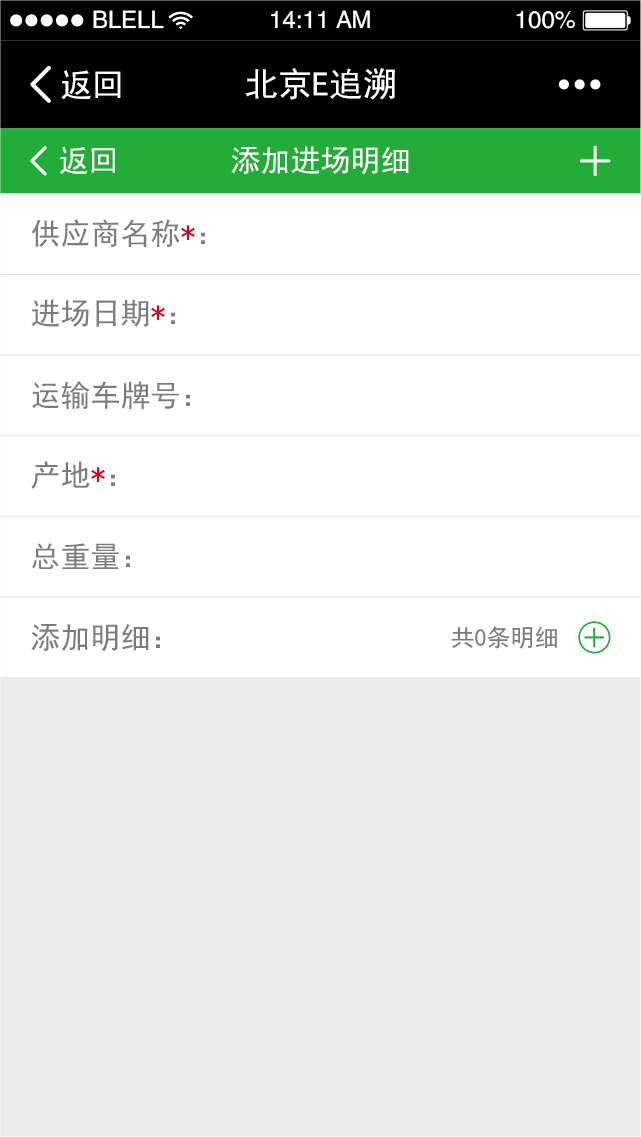
<style>
.page{position:relative;width:641px;height:1137px;background:#ebebeb}
.page>*{position:absolute;margin:0}
.t1{font:24px "FZHTJW--GB1-0";color:#ffffff}
.t2{font:32px "SimHei";color:#ffffff}
.t3{font:34px "SimHei";color:#ffffff}
.t4{font:30px "SimHei";color:#ffffff}
.t5{font:30px "SimHei";color:#7c7c7c}
.t6{font:30px "SimHei";color:#d8001a}
.t7{font:24px "SimHei";color:#7c7c7c}
</style>
<div class="page">
<p class="t1" style="left:93px;top:10px;width:71px;height:19px">BLELL</p>
<p class="t1" style="left:271px;top:10px;width:99px;height:19px">14:11 AM</p>
<p class="t1" style="left:516px;top:10px;width:59px;height:19px">100%</p>
<p class="t2" style="left:61px;top:70px;width:60px;height:30px">返回</p>
<p class="t3" style="left:245px;top:68px;width:150px;height:32px">北京E追溯</p>
<p class="t4" style="left:60px;top:147px;width:55px;height:27px">返回</p>
<p class="t4" style="left:231px;top:146px;width:178px;height:29px">添加进场明细</p>
<p class="t5" style="left:31px;top:219px;width:174px;height:29px">供应商名称<span class="t6">*</span>：</p>
<p class="t5" style="left:31px;top:299px;width:144px;height:28px">进场日期<span class="t6">*</span>：</p>
<p class="t5" style="left:32px;top:381px;width:158px;height:29px">运输车牌号：</p>
<p class="t5" style="left:31px;top:461px;width:84px;height:28px">产地<span class="t6">*</span>：</p>
<p class="t5" style="left:32px;top:543px;width:98px;height:27px">总重量：</p>
<p class="t5" style="left:31px;top:624px;width:129px;height:28px">添加明细：</p>
<p class="t7" style="left:451px;top:626px;width:106px;height:23px">共0条明细</p>
</div>
